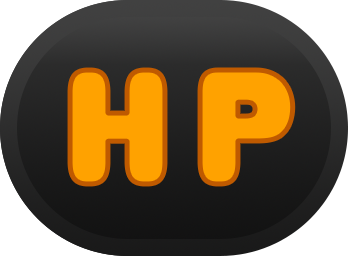
<style>
.page{position:relative;width:348px;height:256px}
.page>*{position:absolute;margin:0}
.t1{font:152.3px "HWTGothicRound";letter-spacing:0.18em;color:#ffa200;font-weight:bold;scale:0.89 1}
</style>
<div class="page">
<p class="t1" style="left:70px;top:70px;width:223px;height:114px">HP</p>
</div>
